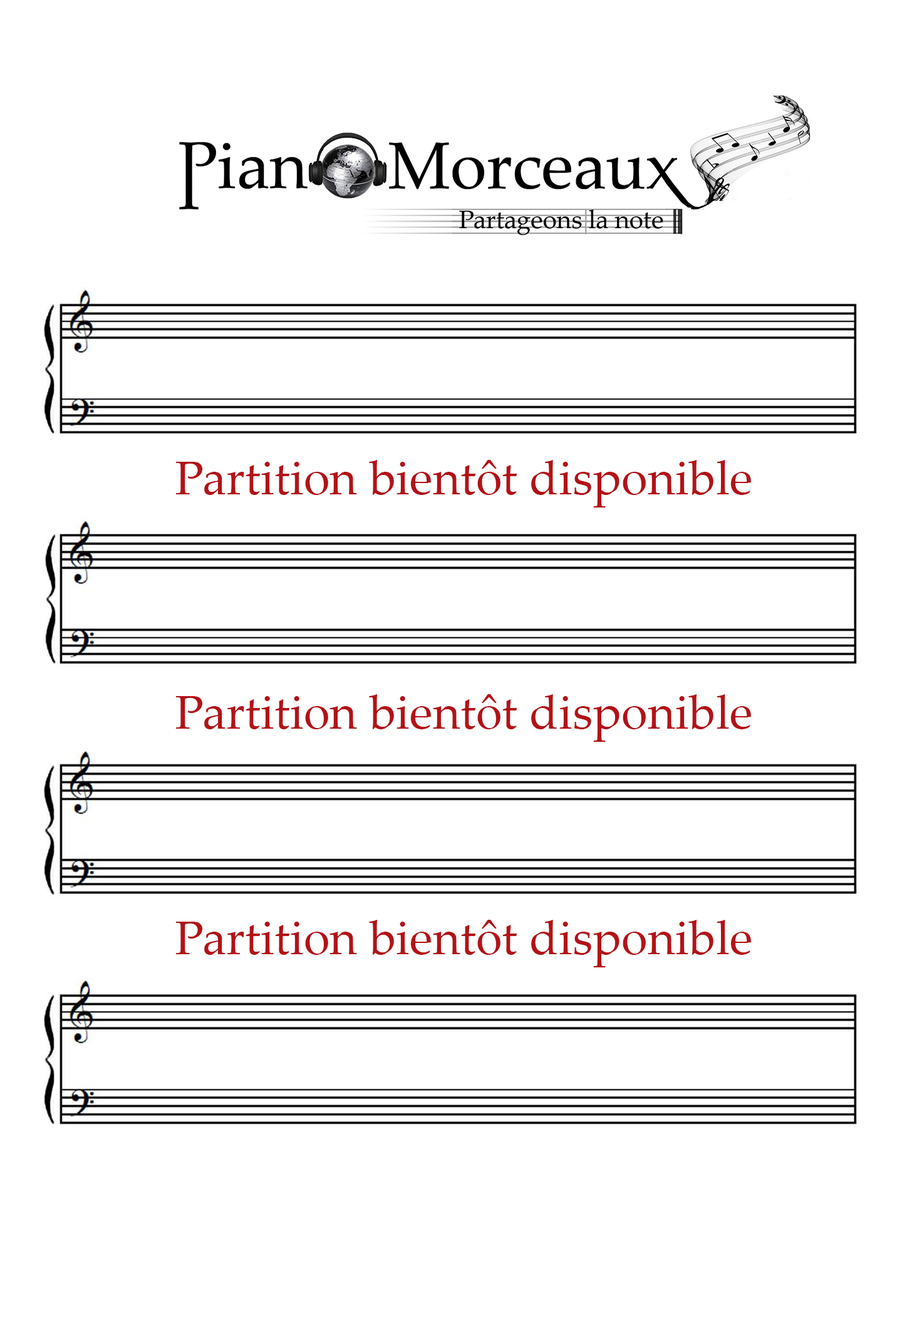
<style>
.page{position:relative;width:902px;height:1322px;background:#ffffff}
.page>*{position:absolute;margin:0}
.t1{font:47.7px "PalatinoLinotype-Roman";color:#b31217}
</style>
<div class="page">
<p class="t1" style="left:175px;top:460px;width:576px;height:47px">Partition bientôt disponible</p>
<p class="t1" style="left:175px;top:694px;width:576px;height:48px">Partition bientôt disponible</p>
<p class="t1" style="left:175px;top:920px;width:576px;height:47px">Partition bientôt disponible</p>
</div>
